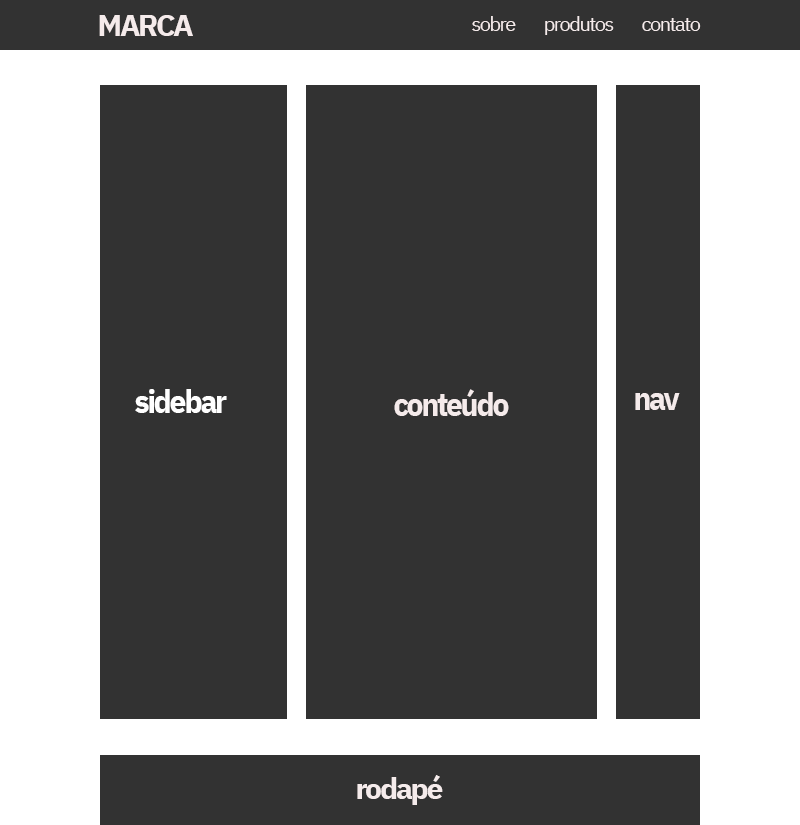
<style>
.page{position:relative;width:800px;height:825px;background:#323232}
.page>*{position:absolute;margin:0}
.t1{font:30px "IBMPlexSans-Bold";letter-spacing:-0.075em;color:#f5ebeb}
.t2{font:20px "IBMPlexSans";letter-spacing:-0.075em;color:#f5ebeb}
.t3{font:33.3px "IBMPlexSans-Bold";letter-spacing:-0.075em;color:#ffffff;scale:0.9 1}
.t4{font:33.3px "IBMPlexSans-Bold";letter-spacing:-0.075em;color:#f5ebeb;scale:0.9 1}
</style>
<div class="page">
<p class="t1" style="left:99px;top:15px;width:94px;height:21px">MARCA</p>
<p class="t2" style="left:472px;top:16px;width:229px;height:19px">sobre         produtos         contato</p>
<p class="t3" style="left:135px;top:389px;width:92px;height:24px">sidebar</p>
<p class="t4" style="left:394px;top:389px;width:115px;height:27px">conteúdo</p>
<p class="t4" style="left:635px;top:393px;width:45px;height:17px">nav</p>
<p class="t1" style="left:357px;top:775px;width:86px;height:30px">rodapé</p>
</div>
